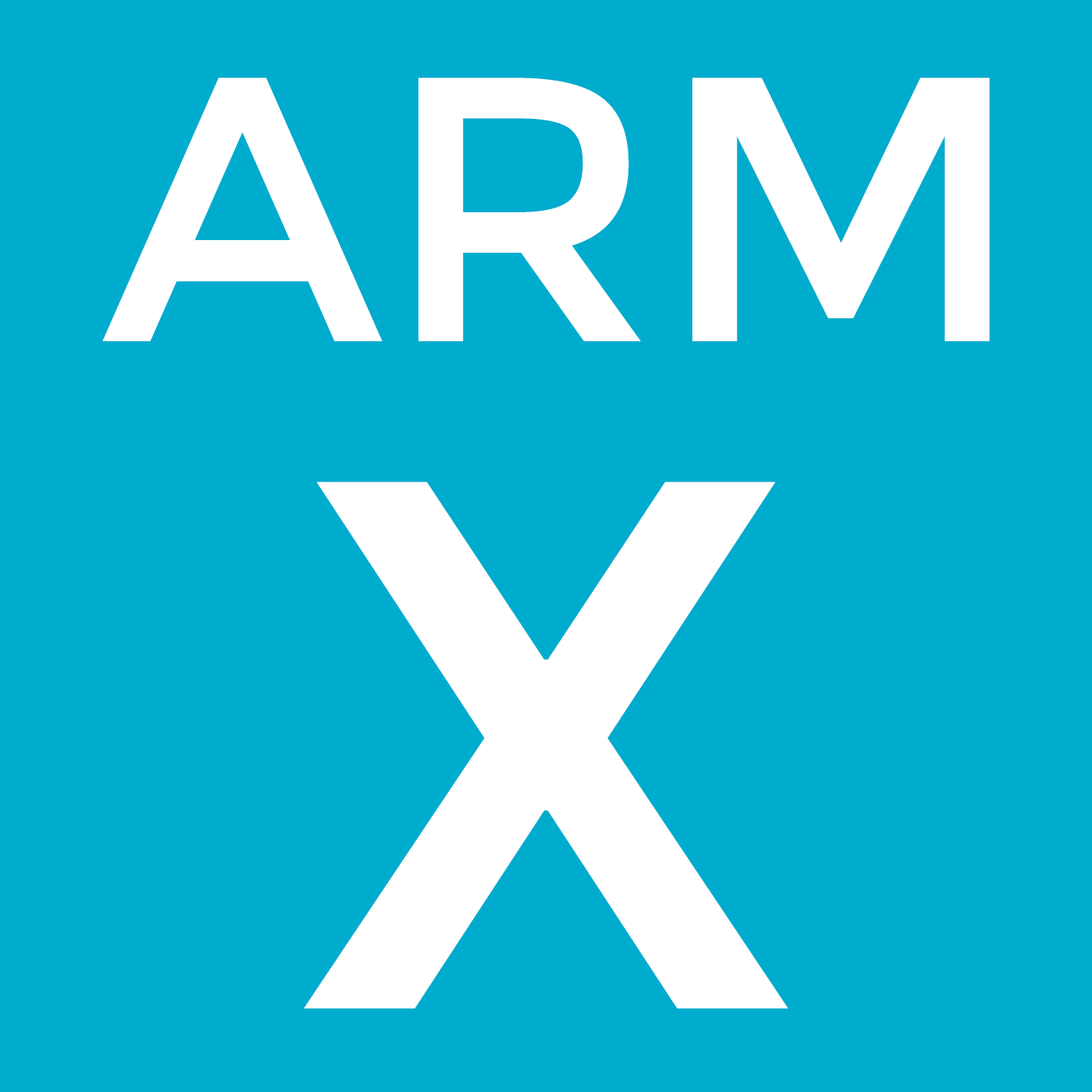
<style>
.page{position:relative;width:1092px;height:1092px;background:#00acce}
.page>*{position:absolute;margin:0}
.t1{font:376.3px "Montserrat-Regular";color:#ffffff}
.t2{font:752.9px "Montserrat-Regular";color:#ffffff}
</style>
<div class="page">
<p class="t1" style="left:102px;top:78px;width:888px;height:264px">ARM</p>
<p class="t2" style="left:304px;top:482px;width:485px;height:526px">X</p>
</div>
